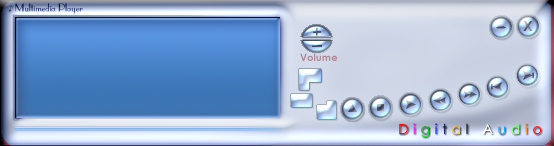
<style>
.page{position:relative;width:554px;height:146px}
.page>*{position:absolute;margin:0}
.t1{font:10px "LevenimMTBold";color:#b08694}
.t2{font:14px "LevenimMT"}
</style>
<div class="page">
<p class="t1" style="left:300px;top:53px;width:38px;height:8px">Volume</p>
<p class="t2" style="left:399px;top:123px;width:142px;height:14px">D i g i t a l   A u d i o</p>
</div>
